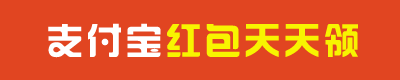
<style>
.page{position:relative;width:400px;height:80px;background:#e14521}
.page>*{position:absolute;margin:0}
.t1{font:36px "¹ã½Ý¾ÓÃÔÄã×Ö¿â";letter-spacing:0.1em;color:#f8f400}
.t2{font:36px "¹ã½Ý¾ÓÃÔÄã×Ö¿â";letter-spacing:0.1em;color:#ffffff}
</style>
<div class="page">
<p class="t1" style="left:48px;top:23px;width:310px;height:35px"><span class="t2">支付宝</span>红包天天领</p>
</div>
